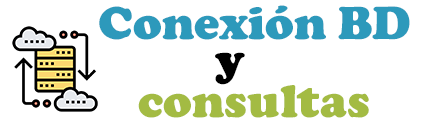
<style>
.page{position:relative;width:430px;height:130px;background:#ffffff}
.page>*{position:absolute;margin:0}
.t1{font:48px "CooperBlack";color:#2d99bb}
.t2{font:48px "CooperBlack";color:#000000}
.t3{font:48px "CooperBlack";color:#a3bb43}
</style>
<div class="page">
<p class="t1" style="left:99px;top:5px;width:311px;height:35px">Conexión BD</p>
<p class="t2" style="left:215px;top:52px;width:30px;height:33px">y</p>
<p class="t3" style="left:138px;top:85px;width:231px;height:33px">consultas</p>
</div>
